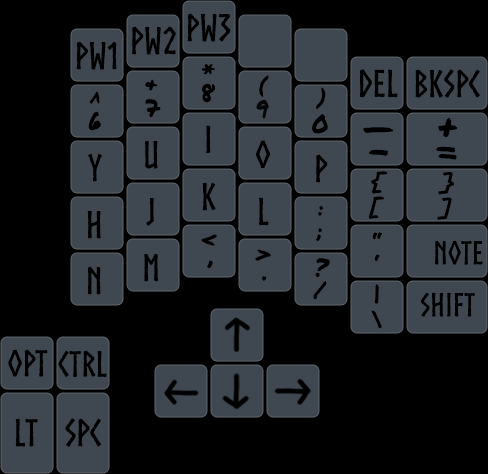
<style>
.page{position:relative;width:488px;height:474px;background:#000000}
.page>*{position:absolute;margin:0}
.t1{font:37px "Norse-Bold";color:#000000}
.t2{font:21px "PermanentMarkerPro";color:#000000}
.t3{font:25px "PermanentMarkerPro";color:#000000}
.t4{font:37px "PermanentMarkerPro";color:#000000}
.t5{font:32px "Norse-Bold";color:#000000}
.t6{font:36px "Norse-Bold";color:#000000}
.t7{font:35px "Norse-Bold";color:#000000}
</style>
<div class="page">
<p class="t1" style="left:187px;top:13px;width:44px;height:29px">PW3</p>
<p class="t1" style="left:132px;top:26px;width:44px;height:29px">PW2</p>
<p class="t1" style="left:76px;top:41px;width:41px;height:29px">PW1</p>
<p class="t2" style="left:201px;top:64px;width:14px;height:11px">*</p>
<p class="t2" style="left:259px;top:75px;width:10px;height:22px">(</p>
<p class="t1" style="left:360px;top:69px;width:38px;height:29px">Del</p>
<p class="t1" style="left:415px;top:69px;width:65px;height:29px">BkSpC</p>
<p class="t2" style="left:145px;top:79px;width:13px;height:12px">&amp;</p>
<p class="t3" style="left:202px;top:83px;width:14px;height:20px">8</p>
<p class="t2" style="left:316px;top:87px;width:10px;height:22px">)</p>
<p class="t2" style="left:89px;top:91px;width:11px;height:13px">^</p>
<p class="t3" style="left:145px;top:99px;width:16px;height:19px">7</p>
<p class="t3" style="left:256px;top:99px;width:13px;height:20px;opacity:0.9">9</p>
<p class="t3" style="left:88px;top:111px;width:13px;height:20px">6</p>
<p class="t3" style="left:312px;top:113px;width:16px;height:21px">0</p>
<p class="t1" style="left:206px;top:125px;width:5px;height:28px">I</p>
<p class="t4" style="left:438px;top:118px;width:19px;height:19px;text-align:center">+<br>=</p>
<p class="t4" style="left:363px;top:127px;width:30px;height:6px">_</p>
<p class="t1" style="left:145px;top:141px;width:13px;height:28px">U</p>
<p class="t1" style="left:256px;top:140px;width:14px;height:28px">O</p>
<p class="t4" style="left:369px;top:149px;width:20px;height:7px;rotate:180deg">-</p>
<p class="t4" style="left:436px;top:146px;width:21px;height:14px;rotate:180deg">=</p>
<p class="t1" style="left:88px;top:153px;width:14px;height:29px">Y</p>
<p class="t1" style="left:316px;top:154px;width:12px;height:29px">P</p>
<p class="t2" style="left:371px;top:171px;width:17px;height:23px">{</p>
<p class="t2" style="left:438px;top:172px;width:16px;height:23px">}</p>
<p class="t1" style="left:202px;top:182px;width:14px;height:29px">K</p>
<p class="t1" style="left:146px;top:198px;width:8px;height:28px">J</p>
<p class="t1" style="left:259px;top:197px;width:10px;height:29px">L</p>
<p class="t2" style="left:368px;top:196px;width:16px;height:23px">[</p>
<p class="t2" style="left:437px;top:197px;width:15px;height:23px">]</p>
<p class="t2" style="left:318px;top:206px;width:5px;height:10px">:</p>
<p class="t1" style="left:87px;top:210px;width:14px;height:29px">H</p>
<p class="t2" style="left:316px;top:228px;width:6px;height:13px">;</p>
<p class="t2" style="left:372px;top:232px;width:10px;height:8px">“</p>
<p class="t3" style="left:201px;top:234px;width:16px;height:12px">&lt;</p>
<p class="t5" style="left:435px;top:240px;width:48px;height:25px">Note</p>
<p class="t1" style="left:144px;top:253px;width:15px;height:29px">M</p>
<p class="t3" style="left:255px;top:249px;width:16px;height:12px">&gt;</p>
<p class="t2" style="left:374px;top:254px;width:6px;height:7px">‘</p>
<p class="t1" style="left:87px;top:266px;width:14px;height:29px">N</p>
<p class="t3" style="left:207px;top:260px;width:6px;height:9px">,</p>
<p class="t3" style="left:315px;top:258px;width:15px;height:20px">?</p>
<p class="t3" style="left:261px;top:276px;width:6px;height:5px">.</p>
<p class="t3" style="left:313px;top:281px;width:14px;height:19px">/</p>
<p class="t3" style="left:374px;top:284px;width:5px;height:20px;rotate:-17deg">|</p>
<p class="t5" style="left:421px;top:292px;width:54px;height:25px">Shift</p>
<p class="t3" style="left:371px;top:310px;width:11px;height:19px;rotate:-15deg">\</p>
<p class="t6" style="left:8px;top:349px;width:40px;height:28px">Opt</p>
<p class="t7" style="left:58px;top:350px;width:49px;height:28px">Ctrl</p>
<p class="t1" style="left:15px;top:418px;width:23px;height:29px">LT</p>
<p class="t1" style="left:65px;top:418px;width:37px;height:29px">Spc</p>
</div>
